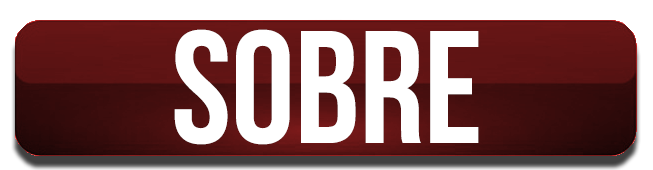
<style>
.page{position:relative;width:653px;height:170px;background:#ffffff}
.page>*{position:absolute;margin:0}
.t1{font:160px "BebasNeue";color:#ffffff}
</style>
<div class="page">
<p class="t1" style="left:174px;top:29px;width:305px;height:116px">sobre</p>
</div>
